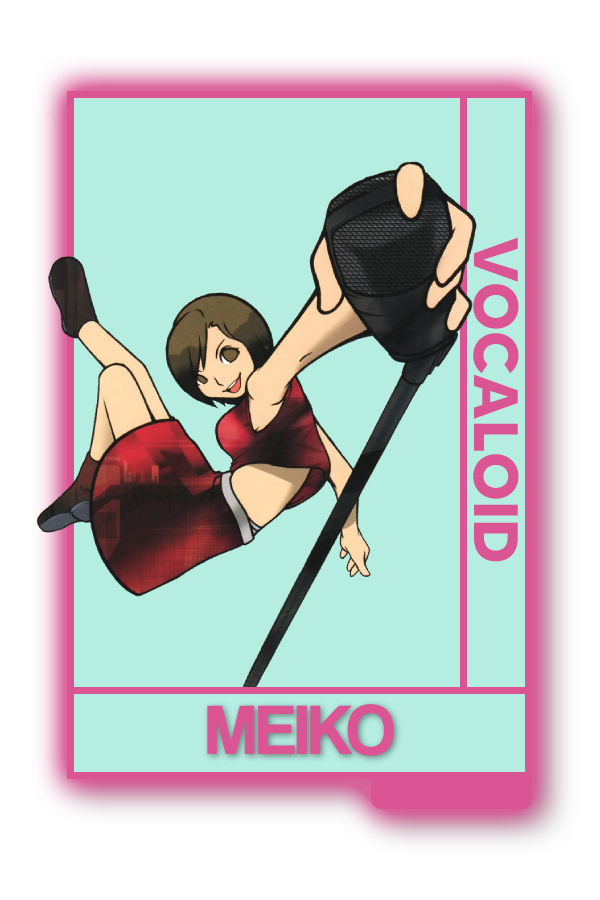
<style>
.page{position:relative;width:600px;height:900px;background:#b5ede1}
.page>*{position:absolute;margin:0}
.t1{font:62.5px "MADETOMMY-Bold";color:#db5493}
.t2{font:72.8px "CoolveticaRg-Regular";color:#db5493}
</style>
<div class="page">
<p class="t1" style="left:473px;top:237px;width:46px;height:325px;rotate:90deg">VOCALOID</p>
<p class="t2" style="left:207px;top:704px;width:187px;height:52px">MEIKO</p>
</div>
